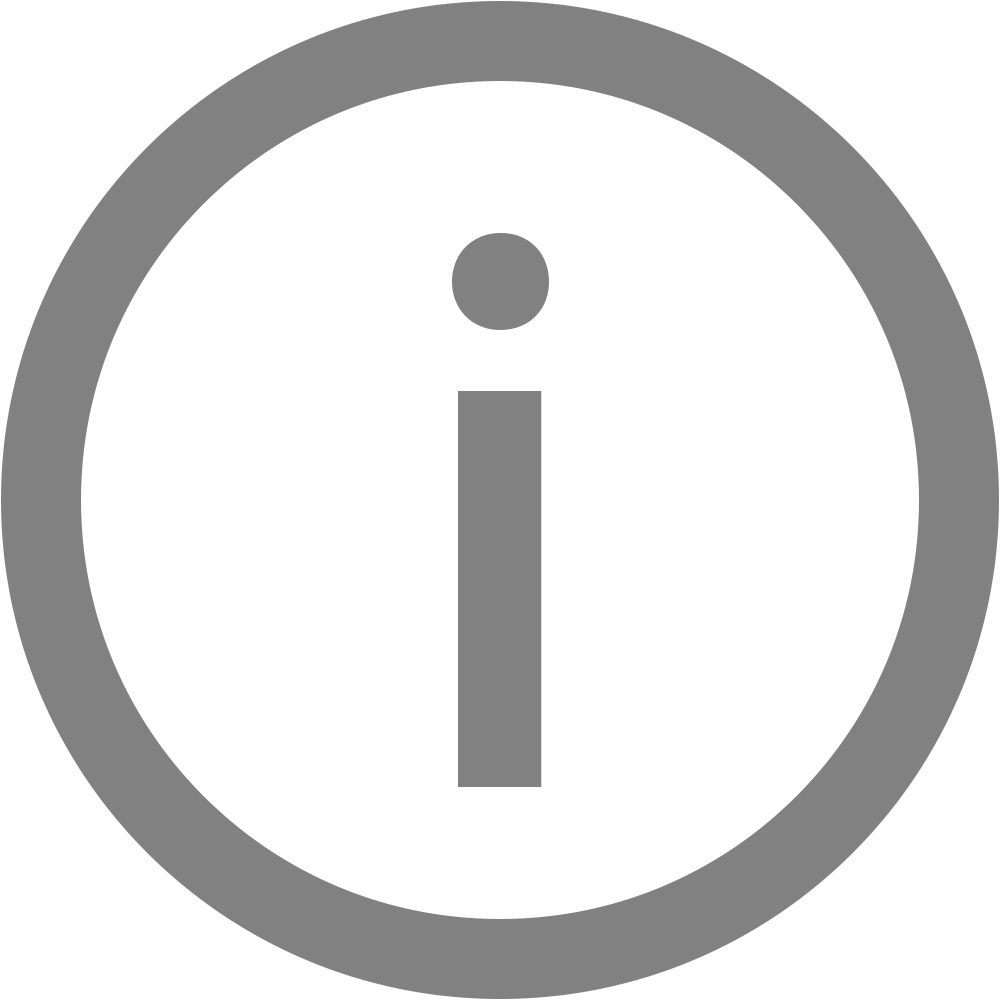
<style>
.page{position:relative;width:1000px;height:1000px;background:#ffffff}
.page>*{position:absolute;margin:0}
.t1{font:718.1px "AdobeFanHeitiStd-Bold";color:#818181}
</style>
<div class="page">
<p class="t1" style="left:452px;top:233px;width:97px;height:554px">i</p>
</div>
